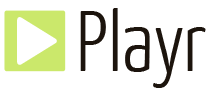
<style>
.page{position:relative;width:210px;height:90px;background:#ffffff}
.page>*{position:absolute;margin:0}
.t1{font:86px "YanoneKaffeesatz-Light";color:#1c140d}
</style>
<div class="page">
<p class="t1" style="left:80px;top:8px;width:126px;height:80px">Playr</p>
</div>
